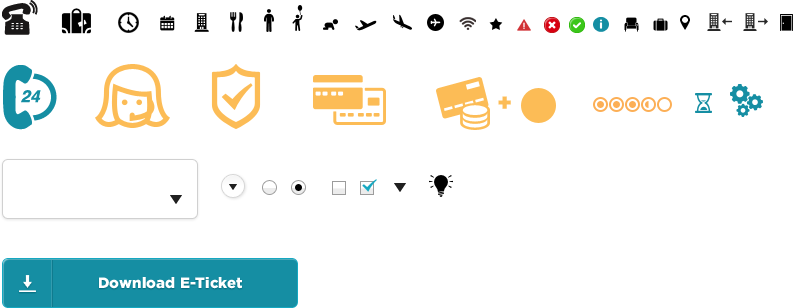
<style>
.page{position:relative;width:793px;height:308px;background:#ffffff}
.page>*{position:absolute;margin:0}
.t1{font:15px "Gotham-Black";letter-spacing:0.01em;color:#ffffff}
</style>
<div class="page">
<p class="t1" style="left:99px;top:277px;width:143px;height:12px">Download E-Ticket</p>
</div>
